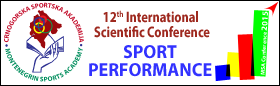
<style>
.page{position:relative;width:280px;height:86px;background:#ffffff}
.page>*{position:absolute;margin:0}
.t1{font:15.1px/14.8px "MyriadPro-Bold";color:#9e291f;scale:0.82 1}
.t2{font:8.3px "MyriadPro-Bold";color:#ffffff;text-transform:uppercase;scale:1.04 1}
.t3{font:5.7px "MyriadPro-Bold";color:#ffffff;scale:1.04 1}
.t4{font:18.8px/18.5px "MyriadPro-Bold";color:#3232ff;text-transform:uppercase;scale:0.96 1}
</style>
<div class="page">
<p class="t1" style="left:94px;top:10px;width:116px;height:28px;text-align:center">12th International <br>Scientific Conference</p>
<p class="t2" style="left:261px;top:11px;width:7px;height:20px;rotate:-87deg">2015</p>
<p class="t3" style="left:260px;top:32px;width:7px;height:43px;rotate:-87deg">MSA Conference</p>
<p class="t4" style="left:89px;top:45px;width:123px;height:32px;text-align:center">SPORT<br>PERFORMANCE</p>
</div>
